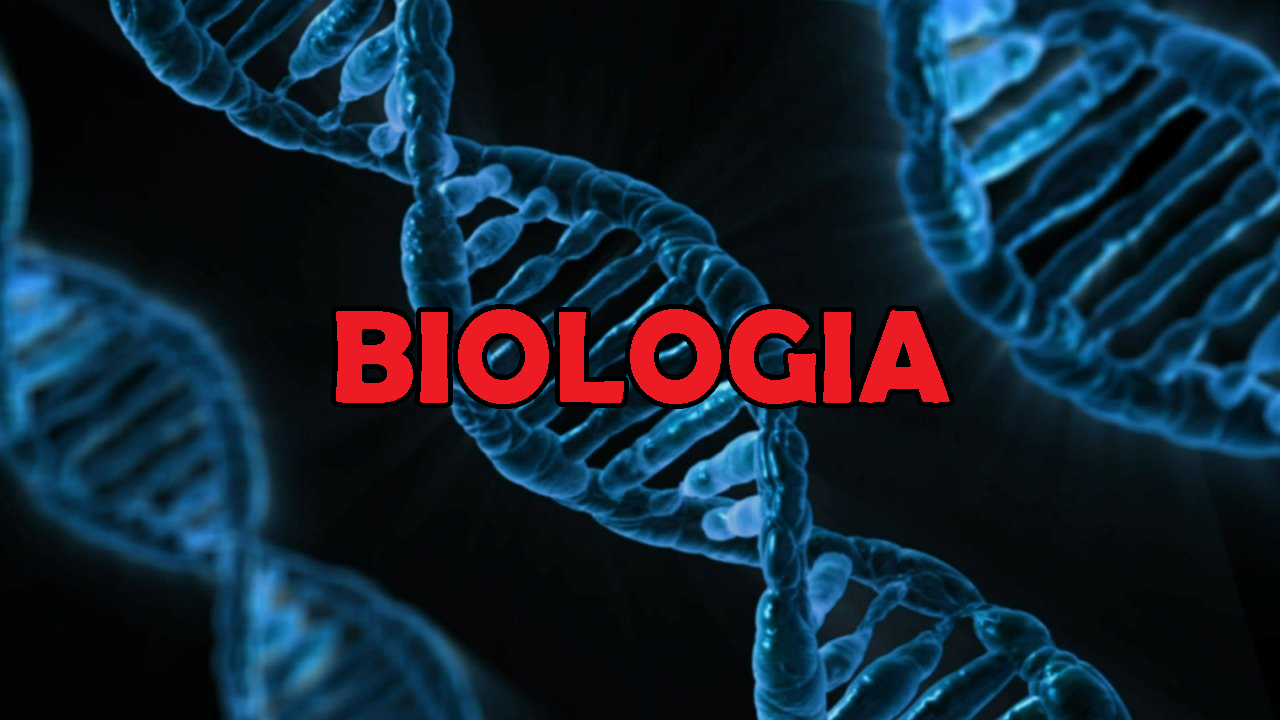
<style>
.page{position:relative;width:1280px;height:720px}
.page>*{position:absolute;margin:0}
.t1{font:132.1px "BerlinSansFBDemi-Bold";color:#ed1c24}
</style>
<div class="page">
<p class="t1" style="left:336px;top:309px;width:614px;height:95px">BIOLOGIA</p>
</div>
